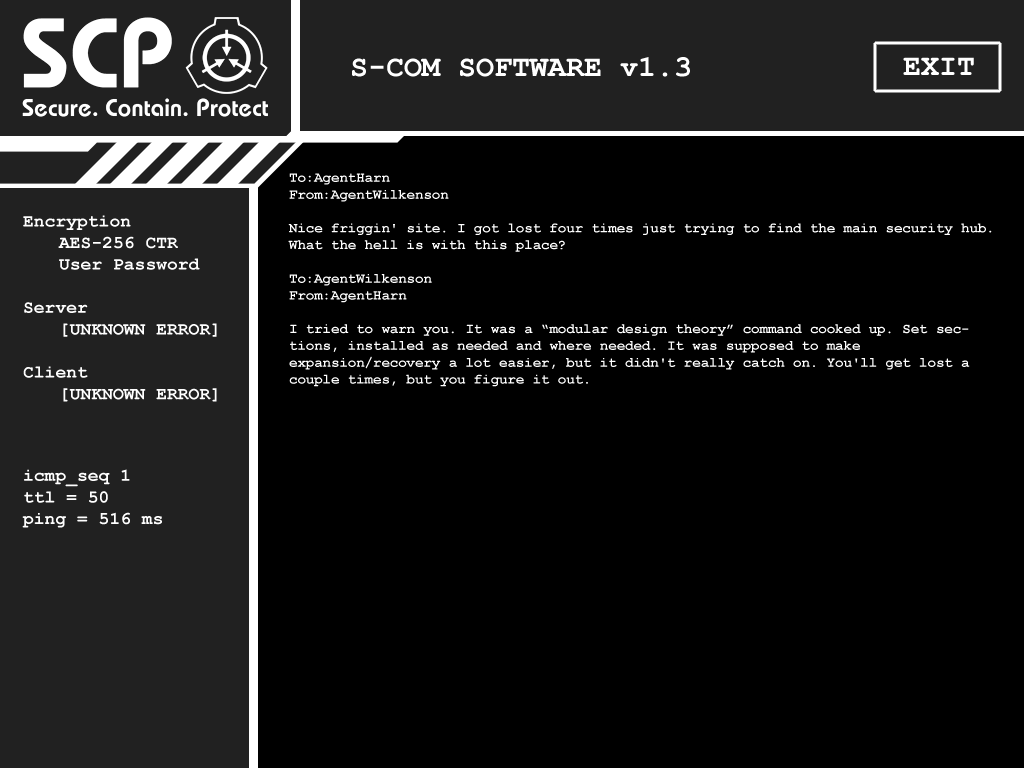
<style>
.page{position:relative;width:1024px;height:768px;background:#000000}
.page>*{position:absolute;margin:0}
.t1{font:30px "CourierNewPS-BoldMT";color:#ffffff}
.t2{font:14px "CourierNewPS-BoldMT";color:#ffffff}
.t3{font:18px "CourierNewPS-BoldMT";color:#ffffff}
</style>
<div class="page">
<p class="t1" style="left:352px;top:57px;width:338px;height:20px">S-COM SOFTWARE v1.3</p>
<p class="t1" style="left:903px;top:57px;width:71px;height:18px">EXIT</p>
<p class="t2" style="left:288px;top:173px;width:704px;height:214px">To:AgentHarn<br>From:AgentWilkenson<br><br>Nice friggin' site. I got lost four times just trying to find the main security hub. What the hell is with this place?<br><br>To:AgentWilkenson<br>From:AgentHarn<br><br>I tried to warn you. It was a “modular design theory” command cooked up. Set sections, installed as needed and where needed. It was supposed to make expansion/recovery a lot easier, but it didn't really catch on. You'll get lost a couple times, but you figure it out.</p>
<p class="t3" style="left:22px;top:215px;width:195px;height:313px">Encryption <br> AES-256 CTR<br> User Password<br><br>Server<br> [UNKNOWN ERROR]<br><br>Client<br> [UNKNOWN ERROR]<br><br><br><br>icmp_seq 1 <br>ttl = 50 <br>ping = 516 ms</p>
</div>
